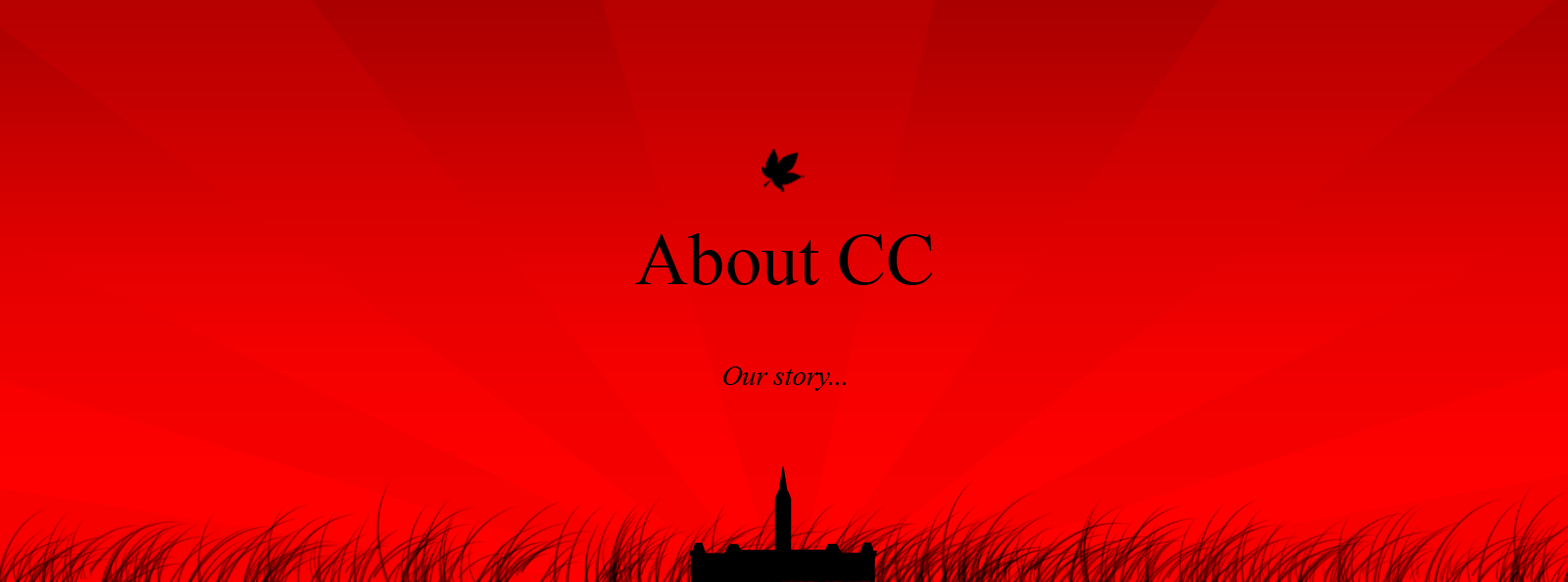
<style>
.page{position:relative;width:1568px;height:582px}
.page>*{position:absolute;margin:0}
.t1{font:27.9px/101.2px "TimesNewRomanPS-ItalicMT";color:#000000}
.t2{font:73.5px/101.2px "TimesNewRomanPSMT";color:#000000}
</style>
<div class="page">
<p class="t1" style="left:635px;top:233px;width:298px;height:158px;text-align:center"><span class="t2">About CC<br></span>Our story...</p>
</div>
